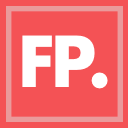
<style>
.page{position:relative;width:128px;height:128px;background:#f45255}
.page>*{position:absolute;margin:0}
.t1{font:68.2px "Futura-Bold";letter-spacing:-0.065em;color:#ffffff}
</style>
<div class="page">
<p class="t1" style="left:22px;top:35px;width:86px;height:54px">FP.</p>
</div>
